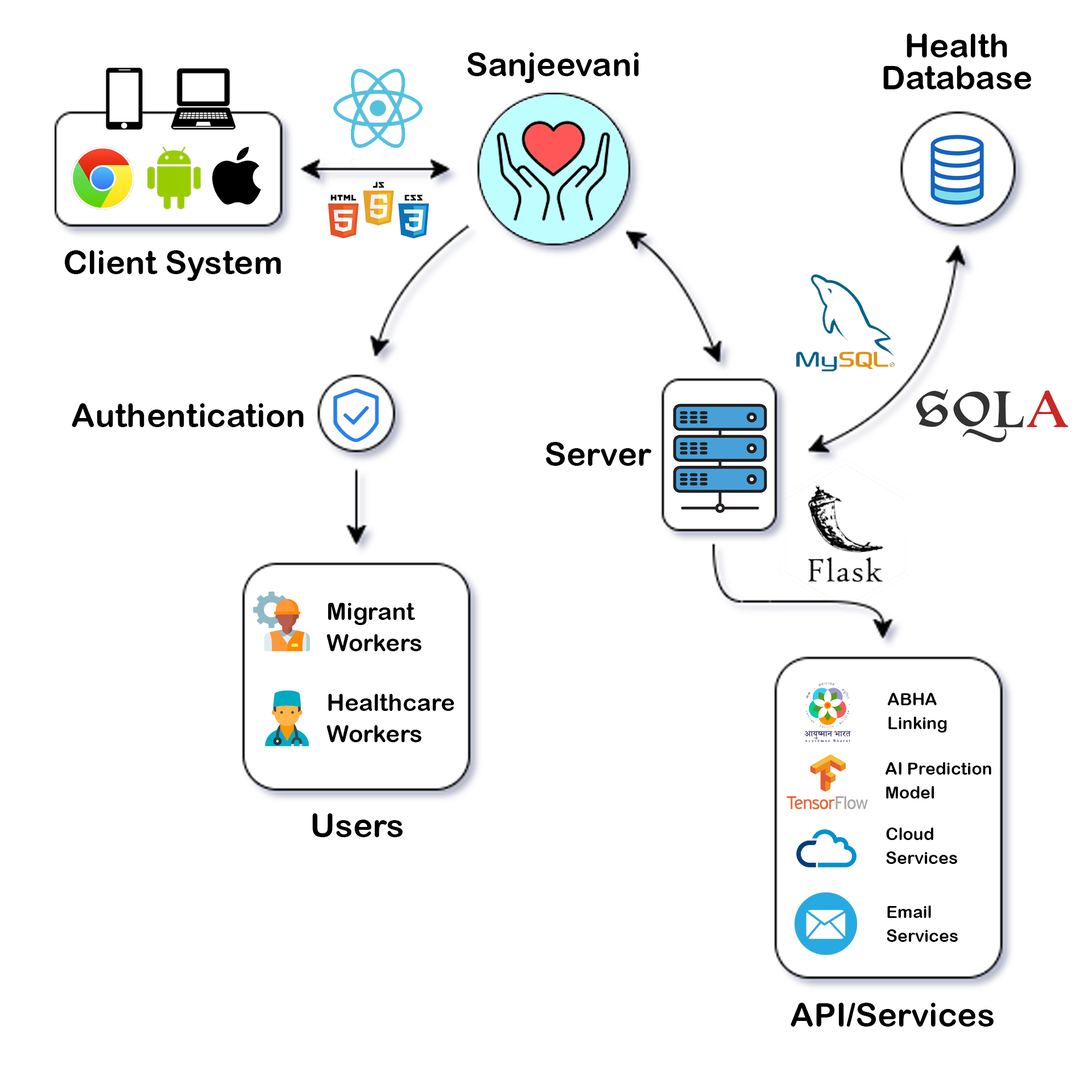
<style>
.page{position:relative;width:1092px;height:1092px;background:#ffffff}
.page>*{position:absolute;margin:0}
.t1{font:33px/31.8px "ArialRoundedMTBold";color:#000000}
.t2{font:33px "ArialRoundedMTBold";color:#000000}
.t3{font:23.9px/31.3px "ArialRoundedMTBold";color:#000000}
.t4{font:17.1px/23.9px "ArialRoundedMTBold";color:#000000}
</style>
<div class="page">
<p class="t1" style="left:883px;top:34px;width:148px;height:55px;text-align:center">Health<br>Database</p>
<p class="t2" style="left:468px;top:52px;width:171px;height:31px">Sanjeevani</p>
<p class="t2" style="left:64px;top:250px;width:217px;height:31px">Client System</p>
<p class="t2" style="left:72px;top:403px;width:232px;height:24px">Authentication</p>
<p class="t2" style="left:546px;top:442px;width:106px;height:24px">Server</p>
<p class="t3" style="left:326px;top:603px;width:95px;height:48px">Migrant<br>Workers</p>
<p class="t3" style="left:326px;top:694px;width:128px;height:48px">Healthcare<br>Workers</p>
<p class="t4" style="left:887px;top:693px;width:60px;height:40px">ABHA<br>Linking</p>
<p class="t4" style="left:885px;top:762px;width:106px;height:37px">AI Prediction<br>Model</p>
<p class="t2" style="left:312px;top:813px;width:91px;height:24px">Users</p>
<p class="t4" style="left:886px;top:828px;width:71px;height:36px">Cloud<br>Services</p>
<p class="t4" style="left:887px;top:905px;width:71px;height:37px">Email<br>Services</p>
<p class="t2" style="left:791px;top:1003px;width:203px;height:24px">API/Services</p>
</div>
